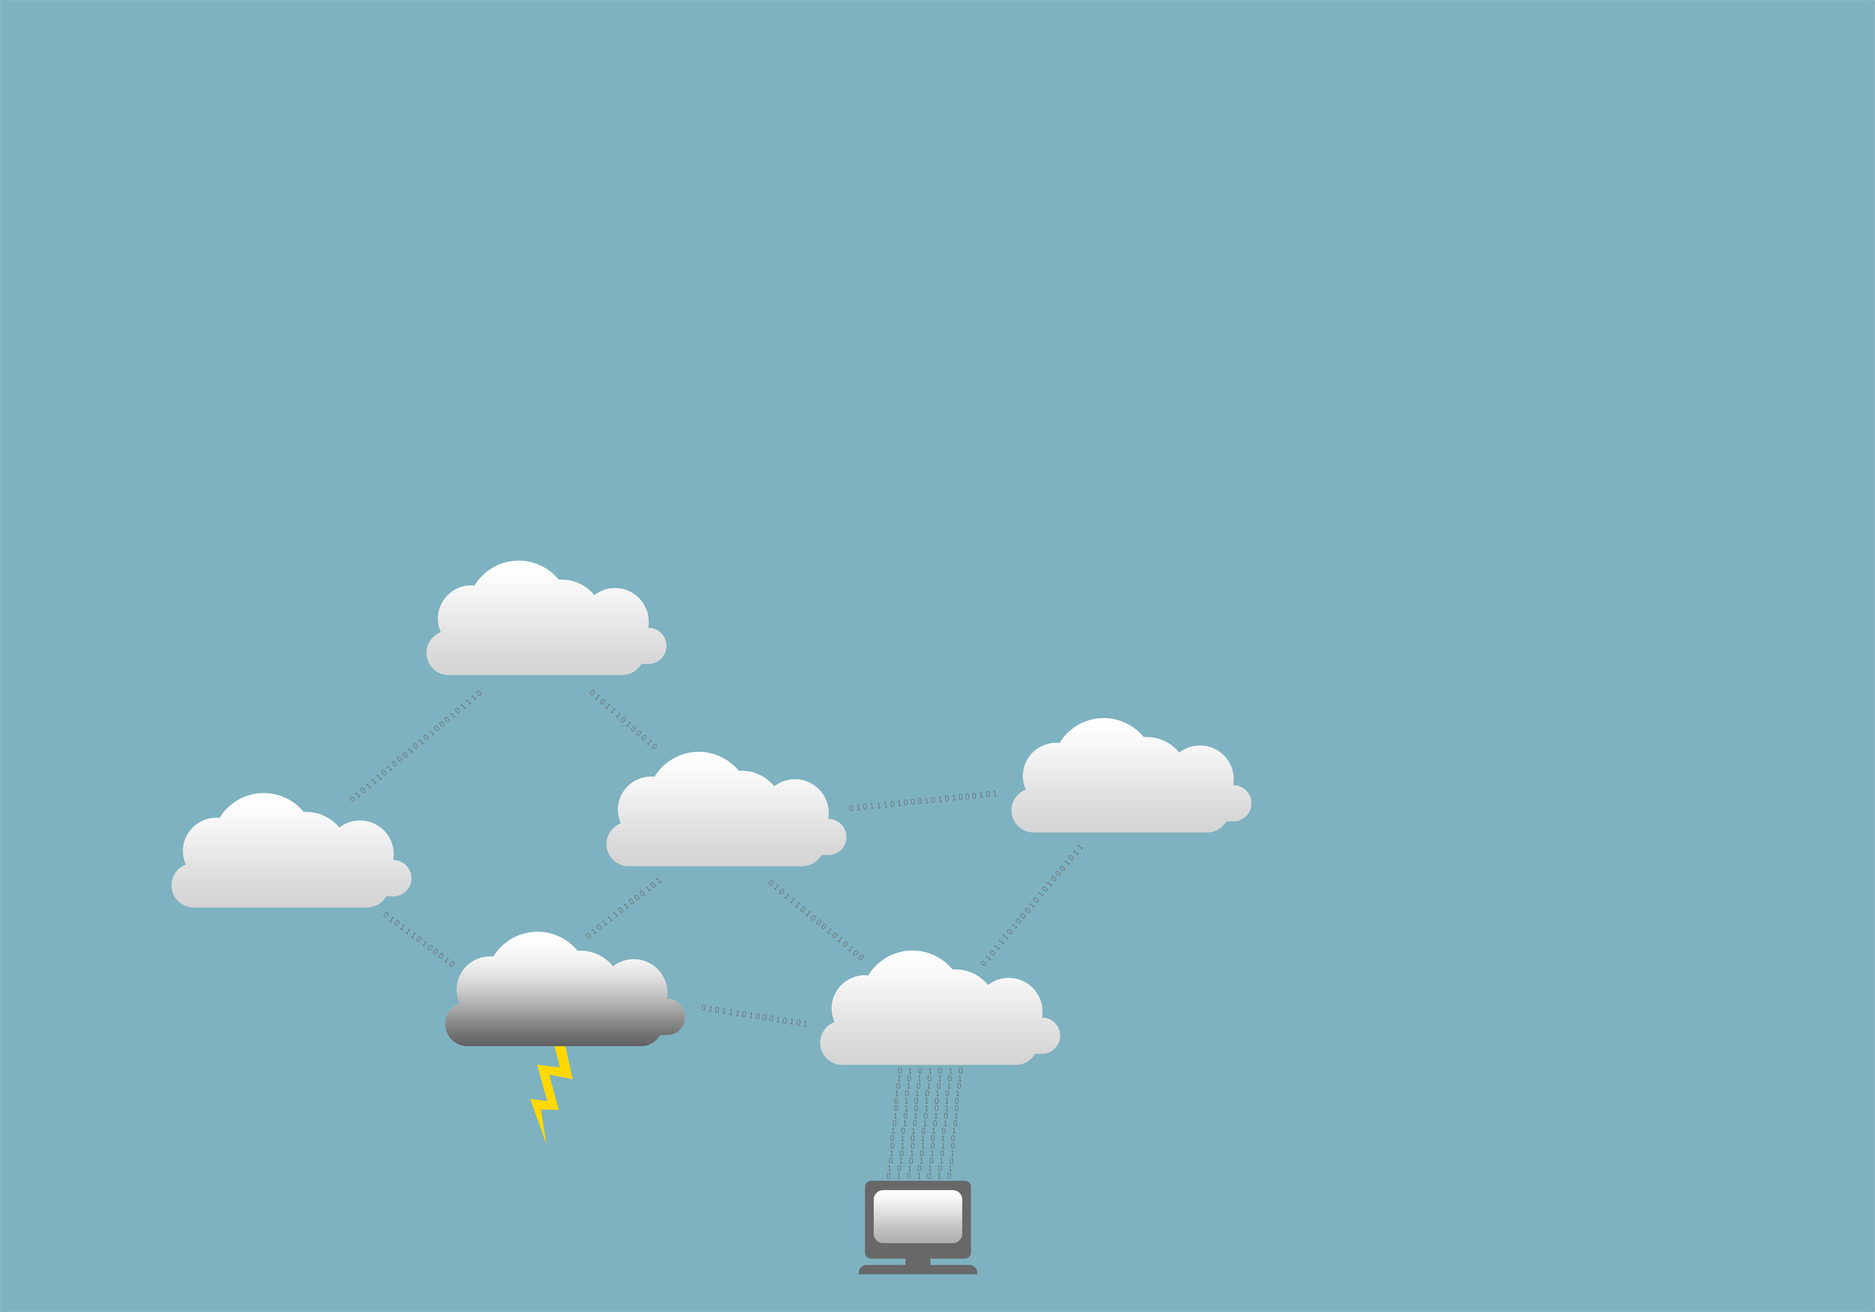
<style>
.page{position:relative;width:1875px;height:1312px;background:#7eb2c1}
.page>*{position:absolute;margin:0}
.t1{font:9px/15px "Courier";letter-spacing:0.2em;color:#686868}
.t2{font:9px "Courier";color:#686868}
</style>
<div class="page">
<p class="t1" style="left:350px;top:690px;width:132px;height:112px;text-align:center">0101110100010101000101110</p>
<p class="t1" style="left:590px;top:690px;width:67px;height:60px;text-align:center">0101110100010101000101110</p>
<p class="t1" style="left:849px;top:791px;width:148px;height:21px;text-align:center">0101110100010101000101110</p>
<p class="t1" style="left:981px;top:845px;width:102px;height:122px;text-align:center">0101110100010101000101110</p>
<p class="t1" style="left:585px;top:878px;width:77px;height:61px;text-align:center">0101110100010101000101110</p>
<p class="t1" style="left:768px;top:880px;width:96px;height:81px;text-align:center">0101110100010101000101110</p>
<p class="t1" style="left:383px;top:912px;width:72px;height:56px;text-align:center">0101110100010101000101110</p>
<p class="t1" style="left:702px;top:1005px;width:105px;height:22px;text-align:center">0101110100010101000101110</p>
<p class="t2" style="left:898px;top:1068px;width:64px;height:6px">0 1 0 1 0 1 0</p>
<p class="t2" style="left:897px;top:1083px;width:64px;height:6px">0 1 0 1 0 1 0</p>
<p class="t2" style="left:898px;top:1076px;width:64px;height:6px">1 0 1 0 1 0 1</p>
<p class="t2" style="left:896px;top:1091px;width:63px;height:5px">1 0 1 0 1 0 1</p>
<p class="t2" style="left:894px;top:1098px;width:64px;height:6px">0 1 0 1 0 1 0</p>
<p class="t2" style="left:894px;top:1106px;width:64px;height:6px">0 1 0 1 0 1 0</p>
<p class="t2" style="left:893px;top:1121px;width:64px;height:5px">0 1 0 1 0 1 0</p>
<p class="t2" style="left:894px;top:1113px;width:64px;height:6px">1 0 1 0 1 0 1</p>
<p class="t2" style="left:892px;top:1128px;width:64px;height:6px">1 0 1 0 1 0 1</p>
<p class="t2" style="left:891px;top:1136px;width:64px;height:6px">0 1 0 1 0 1 0</p>
<p class="t2" style="left:891px;top:1143px;width:64px;height:6px">0 1 0 1 0 1 0</p>
<p class="t2" style="left:890px;top:1151px;width:64px;height:5px">1 0 1 0 1 0 1</p>
<p class="t2" style="left:888px;top:1166px;width:64px;height:6px">1 0 1 0 1 0 1</p>
<p class="t2" style="left:889px;top:1158px;width:64px;height:6px">0 1 0 1 0 1 0</p>
<p class="t2" style="left:887px;top:1173px;width:64px;height:6px">0 1 0 1 0 1 0</p>
</div>
